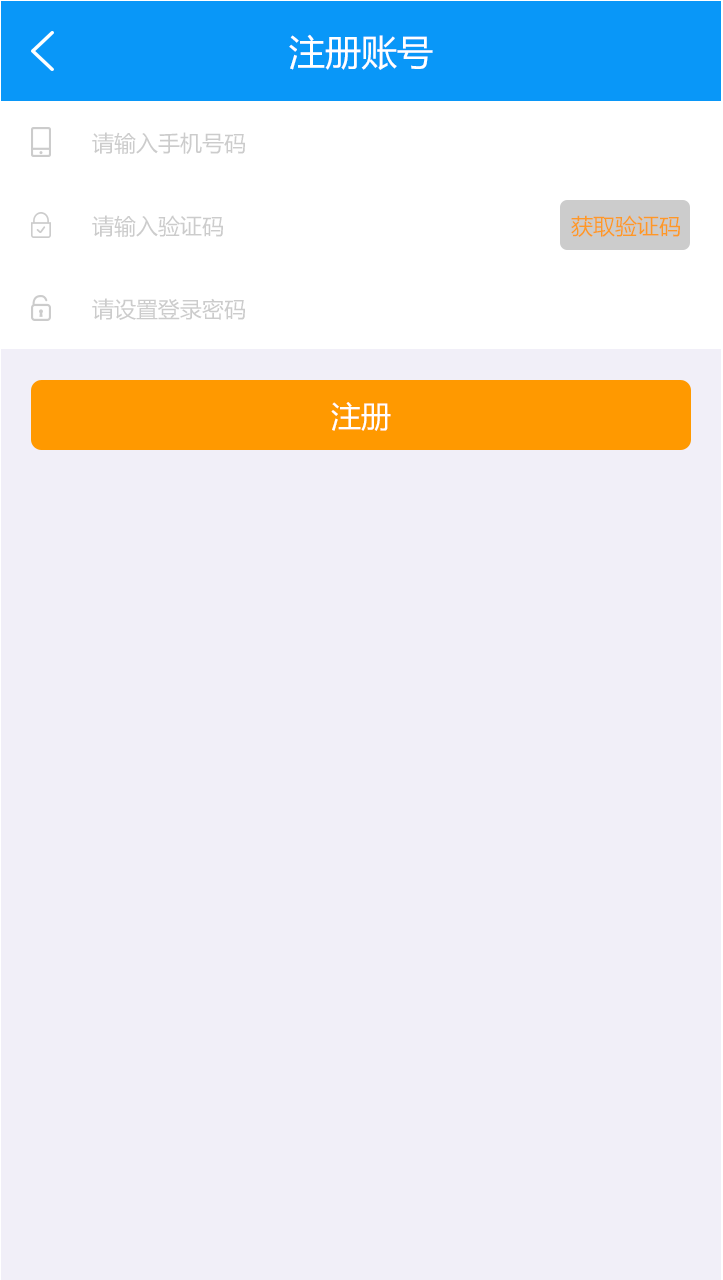
<style>
.page{position:relative;width:723px;height:1280px;background:#f1eff8}
.page>*{position:absolute;margin:0}
.t1{font:36px "MicrosoftYaHei";color:#ffffff}
.t2{font:22px "MicrosoftYaHei";color:#cccccc}
.t3{font:22px "MicrosoftYaHei";color:#fd9927}
.t4{font:30px "MicrosoftYaHei";color:#ffffff}
</style>
<div class="page">
<p class="t1" style="left:289px;top:34px;width:144px;height:36px">注册账号</p>
<p class="t2" style="left:92px;top:132px;width:153px;height:22px">请输入手机号码</p>
<p class="t2" style="left:92px;top:215px;width:131px;height:22px">请输入验证码</p>
<p class="t3" style="left:571px;top:215px;width:109px;height:22px">获取验证码</p>
<p class="t2" style="left:92px;top:298px;width:153px;height:22px">请设置登录密码</p>
<p class="t4" style="left:331px;top:402px;width:60px;height:29px">注册</p>
</div>
